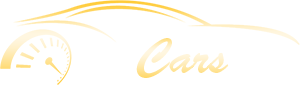
<style>
.page{position:relative;width:300px;height:85px;background:#ffffff}
.page>*{position:absolute;margin:0}
.t1{font:48px "BrushScriptStd"}
</style>
<div class="page">
<p class="t1" style="left:136px;top:38px;width:93px;height:40px">Cars</p>
</div>
